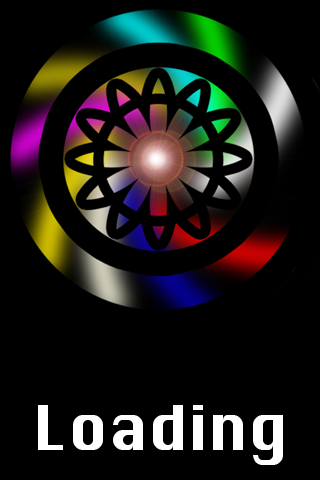
<style>
.page{position:relative;width:320px;height:480px;background:#000000}
.page>*{position:absolute;margin:0}
.t1{font:60px "Krungthep";color:#ffffff}
</style>
<div class="page">
<p class="t1" style="left:38px;top:405px;width:245px;height:60px">Loading</p>
</div>
